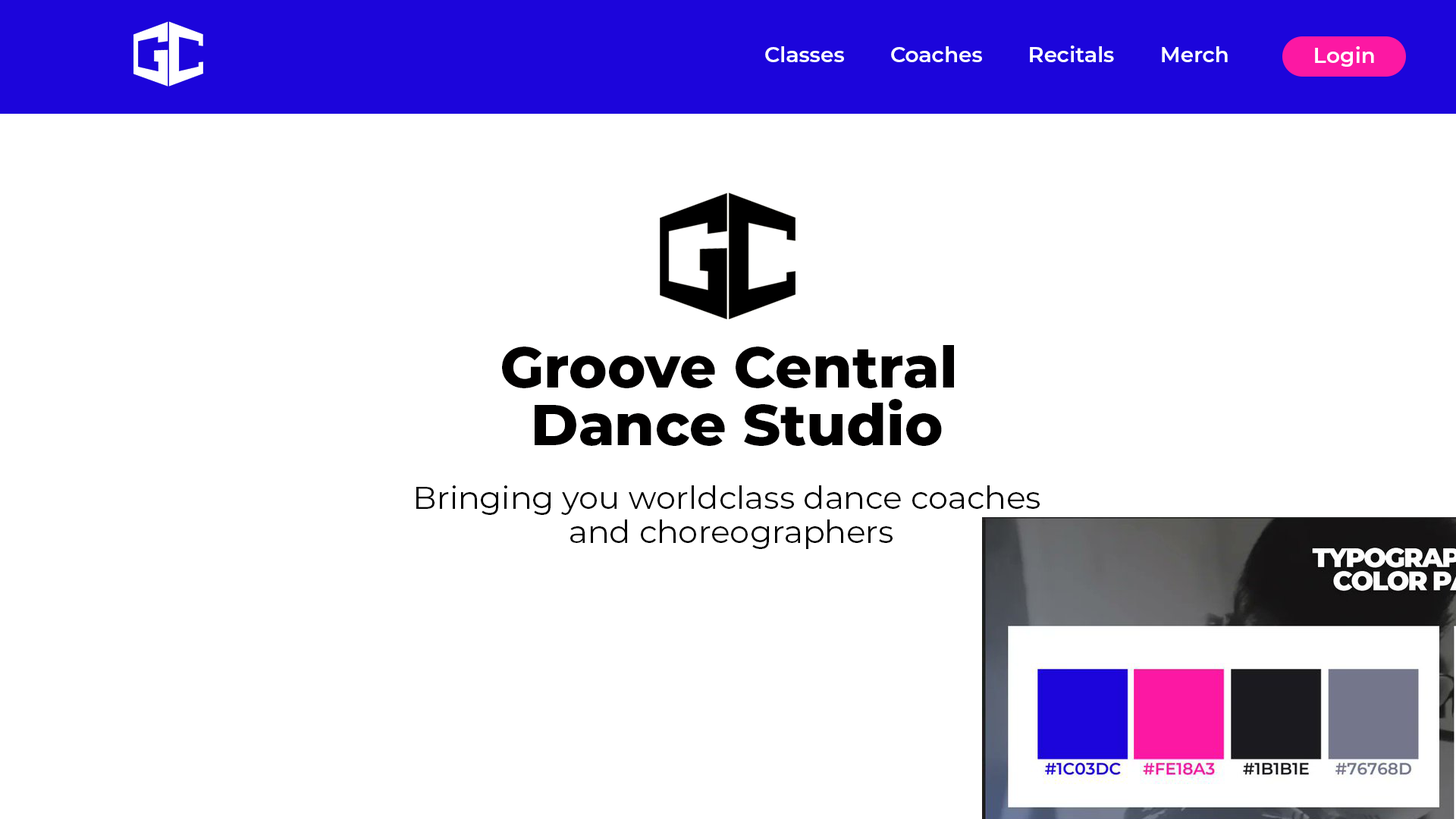
<style>
.page{position:relative;width:1456px;height:819px;background:#ffffff}
.page>*{position:absolute;margin:0}
.t1{font:21.2px "Montserrat-SemiBold";color:#ffffff}
.t2{font:57.6px/57.6px "Montserrat-ExtraBold";color:#010000}
.t3{font:31.9px/34.1px "Montserrat-Regular";color:#000000}
</style>
<div class="page">
<p class="t1" style="left:765px;top:46px;width:79px;height:16px">Classes</p>
<p class="t1" style="left:891px;top:46px;width:91px;height:16px">Coaches</p>
<p class="t1" style="left:1030px;top:45px;width:84px;height:17px">Recitals</p>
<p class="t1" style="left:1162px;top:46px;width:66px;height:16px">Merch</p>
<p class="t1" style="left:1315px;top:46px;width:59px;height:21px">Login</p>
<p class="t2" style="left:502px;top:345px;width:452px;height:101px;text-align:center">Groove Central <br>Dance Studio</p>
<p class="t3" style="left:416px;top:485px;width:624px;height:64px;text-align:center">Bringing you worldclass dance coaches <br>and choreographers</p>
</div>
